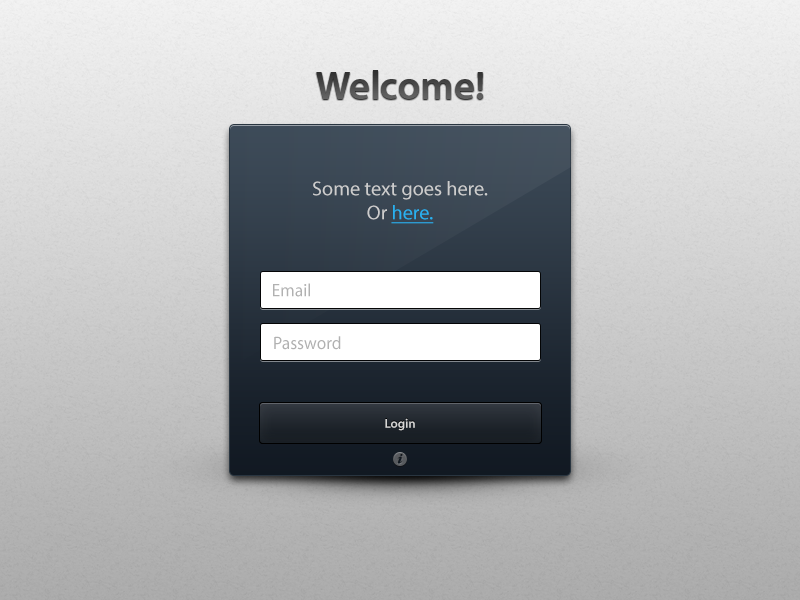
<style>
.page{position:relative;width:800px;height:600px}
.page>*{position:absolute;margin:0}
.t1{font:39.6px "MyriadPro-Semibold";color:#505050}
.t2{font:20px "MyriadPro-Regular";color:#cdcdcd}
.t3{font:20px "MyriadPro-Regular";color:#28b1f0;text-decoration:underline}
.t4{font:18px "MyriadPro-Regular";color:#b1b1b1;scale:0.97 1}
.t5{font:12.9px "MyriadPro-Semibold"}
.t6{font:12.9px "MyriadPro-Semibold";color:#d7d7d7}
</style>
<div class="page">
<p class="t1" style="left:316px;top:70px;width:167px;height:29px">Welcome!</p>
<p class="t2" style="left:313px;top:181px;width:175px;height:43px;text-align:center">Some text goes here.<br>Or <span class="t3">here.</span></p>
<p class="t4" style="left:273px;top:283px;width:37px;height:14px">Email</p>
<p class="t4" style="left:274px;top:336px;width:67px;height:14px">Password</p>
<p class="t5" style="left:385px;top:419px;width:30px;height:13px">Login</p>
<p class="t6" style="left:385px;top:418px;width:30px;height:13px">Login</p>
</div>
